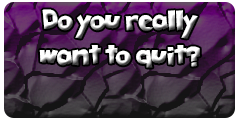
<style>
.page{position:relative;width:240px;height:120px}
.page>*{position:absolute;margin:0}
.t1{font:29.2px "TikiTropic"}
</style>
<div class="page">
<p class="t1" style="left:39px;top:9px;width:161px;height:59px;text-align:center">Do you really<br>want to quit?</p>
</div>
